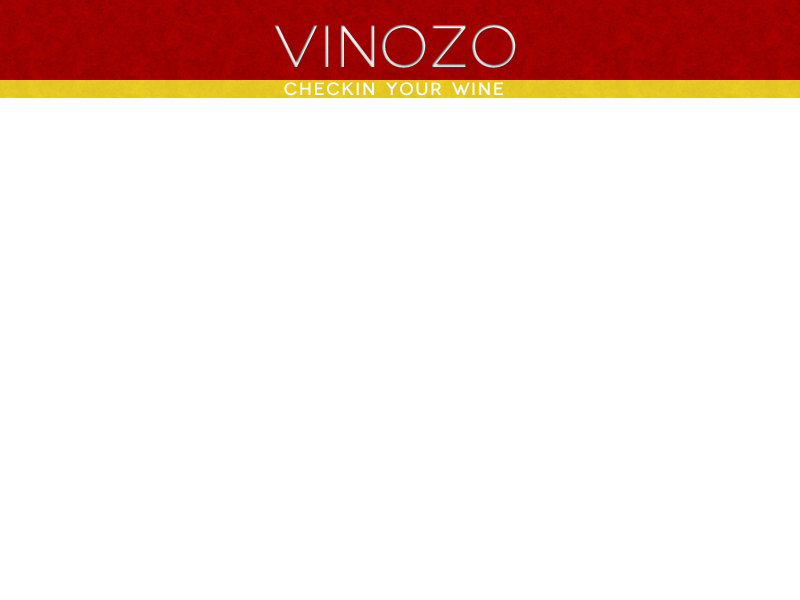
<style>
.page{position:relative;width:800px;height:600px;background:#ffffff}
.page>*{position:absolute;margin:0}
.t1{font:60px "Novecentowide-Book"}
.t2{font:18px "Novecentowide-Medium";letter-spacing:0.075em;color:#fcfcfc}
</style>
<div class="page">
<p class="t1" style="left:274px;top:24px;width:242px;height:44px">Vinozo</p>
<p class="t2" style="left:284px;top:82px;width:219px;height:14px">checkin YOUR wine</p>
</div>
